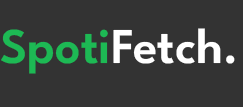
<style>
.page{position:relative;width:243px;height:107px;background:#333333}
.page>*{position:absolute;margin:0}
.t1{font:50px "LeagueSpartan-SemiBold";color:#ffffff}
.t2{font:50px "LeagueSpartan-SemiBold";color:#1db954}
</style>
<div class="page">
<p class="t1" style="left:1px;top:28px;width:234px;height:46px"><span class="t2">Spoti</span>Fetch.</p>
</div>
